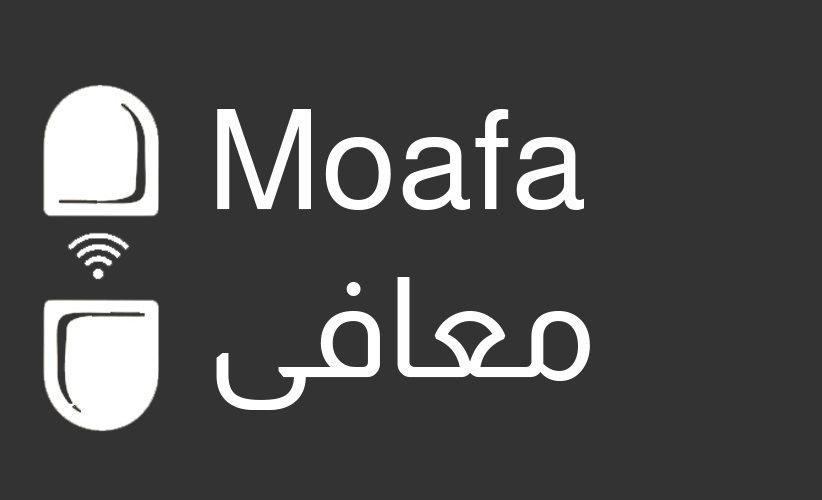
<style>
.page{position:relative;width:822px;height:500px;background:#333333}
.page>*{position:absolute;margin:0}
.t1{font:139.4px "Almarai-Regular";color:#ffffff}
</style>
<div class="page">
<p class="t1" style="left:216px;top:109px;width:374px;height:301px">Moafa<br>معافى</p>
</div>
